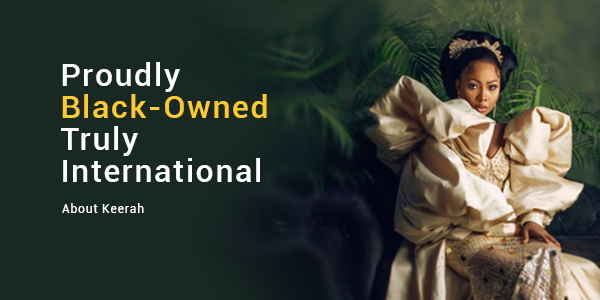
<style>
.page{position:relative;width:600px;height:300px;background:#182823}
.page>*{position:absolute;margin:0}
.t1{font:32px/32px "Roboto-Medium";letter-spacing:0.05em;color:#fefefe}
.t2{font:32px/32px "Roboto-Medium";letter-spacing:0.05em;color:#ffcb2c}
.t3{font:12.5px "Roboto-Regular";letter-spacing:0.05em;color:#ffffff}
</style>
<div class="page">
<p class="t1" style="left:61px;top:62px;width:206px;height:120px">Proudly <br><span class="t2">Black-Owned<br></span>Truly <br>International</p>
<p class="t3" style="left:62px;top:203px;width:82px;height:10px">About Keerah</p>
</div>
